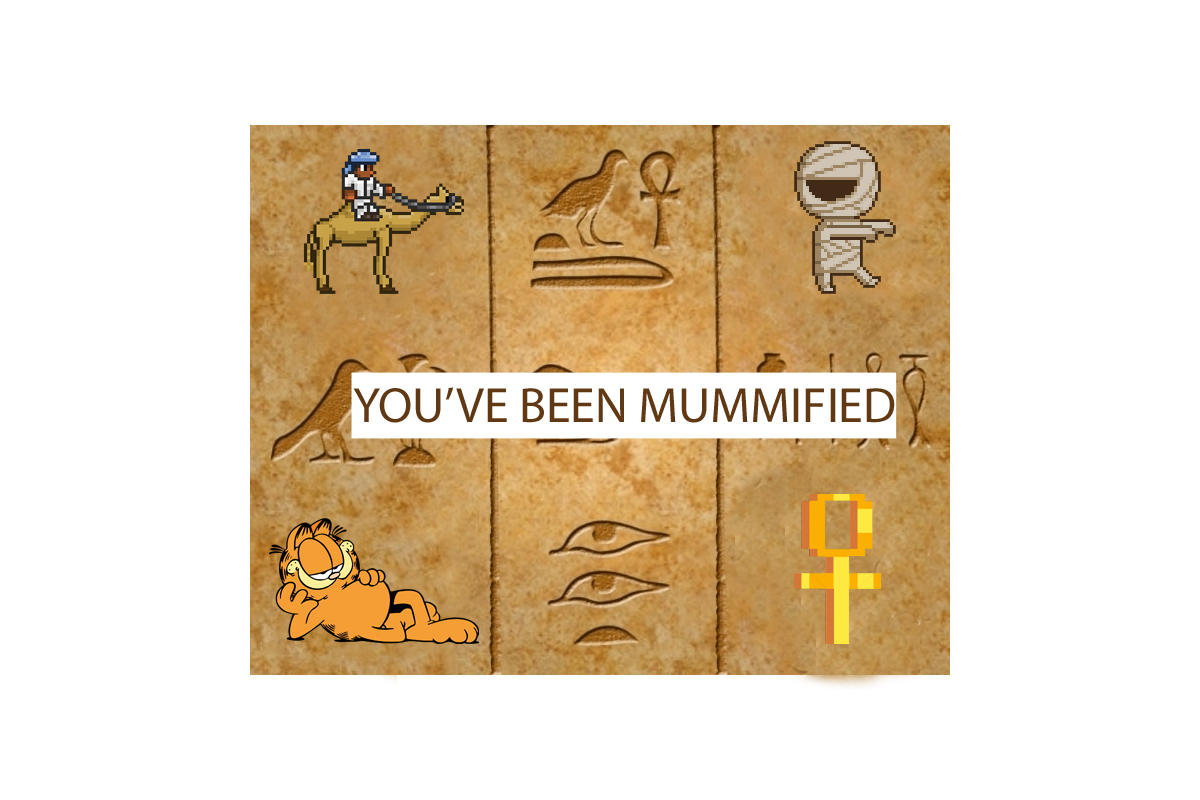
<style>
.page{position:relative;width:1200px;height:800px;background:#ffffff}
.page>*{position:absolute;margin:0}
.t1{font:49.8px "MyriadPro-Regular";color:#603813}
</style>
<div class="page">
<p class="t1" style="left:353px;top:387px;width:542px;height:36px">YOU’VE BEEN MUMMIFIED</p>
</div>
